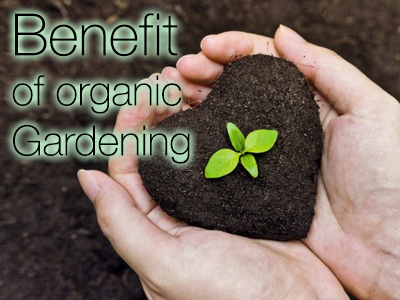
<style>
.page{position:relative;width:400px;height:300px}
.page>*{position:absolute;margin:0}
.t1{font:41.7px "HelveticaNeue-Thin";color:#000000}
.t2{font:58.3px "HelveticaNeue-Thin";color:#000000}
</style>
<div class="page">
<p class="t1" style="left:12px;top:13px;width:178px;height:151px"><span class="t2">Benefit<br></span>of organic<br>Gardening</p>
</div>
